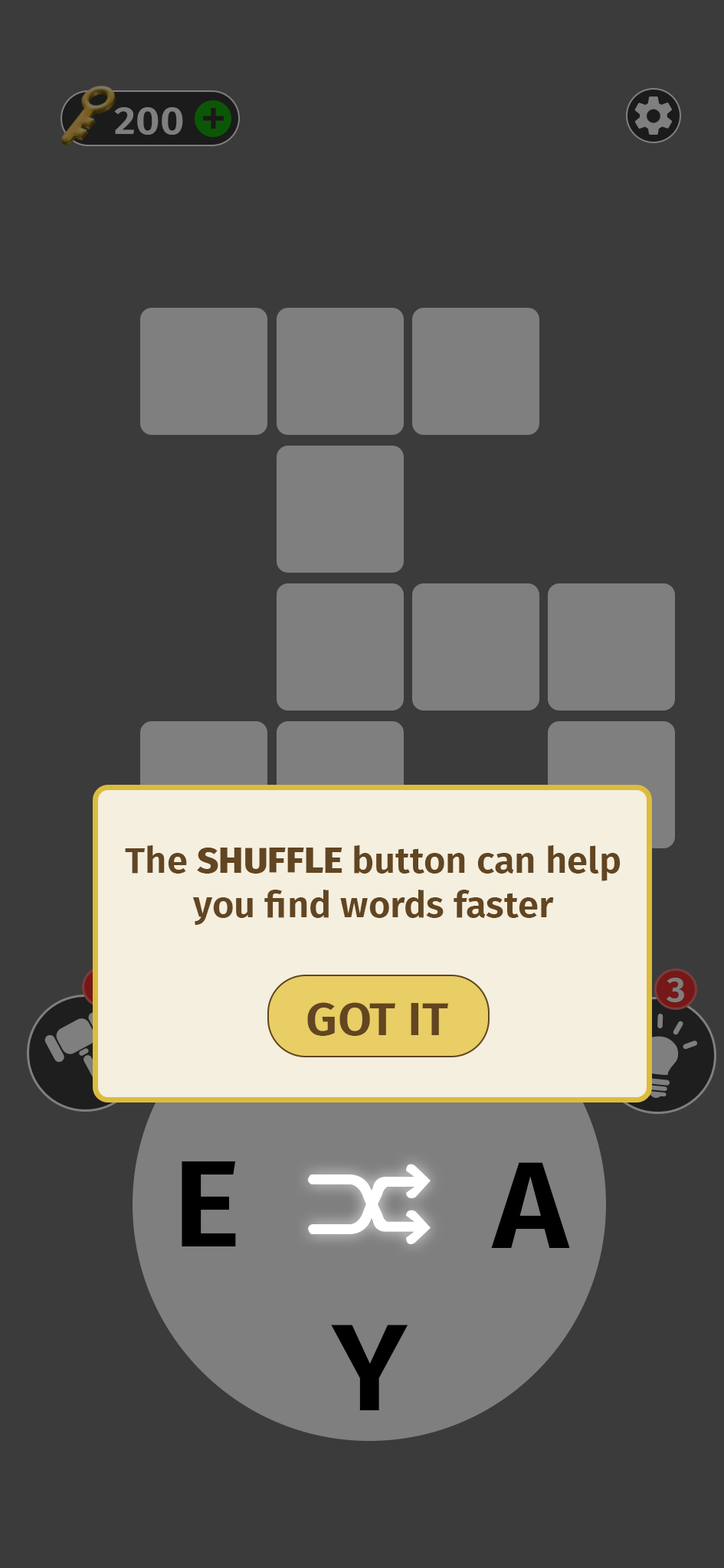
<style>
.page{position:relative;width:724px;height:1568px;background:#3b3b3b}
.page>*{position:absolute;margin:0}
.t1{font:39.7px "FiraSans-SemiBold";color:#7f7f7f;scale:1.05 1}
.t2{font:35.6px "FiraSans-SemiBold";color:#624521;scale:1.05 1}
.t3{font:35.6px "FiraSans-ExtraBold";color:#624521;scale:1.05 1}
.t4{font:35.1px "FiraSans-SemiBold";color:#f5efdf;scale:1.05 1}
.t5{font:35.1px "FiraSans-SemiBold";color:#7f7f7f;scale:1.05 1}
.t6{font:46.5px "FiraSans-SemiBold";color:#624521;scale:1.05 1}
.t7{font:122.9px "FiraSans-SemiBold";color:#000000;scale:1.05 1}
</style>
<div class="page">
<p class="t1" style="left:114px;top:107px;width:69px;height:28px">200</p>
<p class="t2" style="left:125px;top:845px;width:495px;height:80px;text-align:center">The <span class="t3">SHUFFLE </span>button can help<br>you find words faster</p>
<p class="t4" style="left:96px;top:975px;width:13px;height:24px">1</p>
<p class="t5" style="left:666px;top:978px;width:18px;height:24px">3</p>
<p class="t6" style="left:307px;top:1002px;width:141px;height:34px">GOT IT</p>
<p class="t7" style="left:181px;top:1161px;width:55px;height:85px">E</p>
<p class="t7" style="left:491px;top:1162px;width:79px;height:86px">A</p>
<p class="t7" style="left:331px;top:1325px;width:76px;height:85px">Y</p>
</div>
